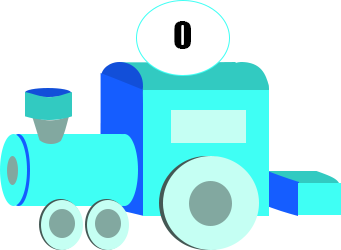
<style>
.page{position:relative;width:341px;height:250px;background:#ffffff}
.page>*{position:absolute;margin:0}
.t1{font:36px "Impact";color:#000000}
</style>
<div class="page">
<p class="t1" style="left:174px;top:21px;width:17px;height:28px">0</p>
</div>
